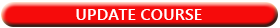
<style>
.page{position:relative;width:280px;height:28px;background:#f60b0b}
.page>*{position:absolute;margin:0}
.t1{font:16.4px "YuGothicUI-Bold";color:#ffffff}
</style>
<div class="page">
<p class="t1" style="left:76px;top:9px;width:126px;height:11px">UPDATE COURSE</p>
</div>
